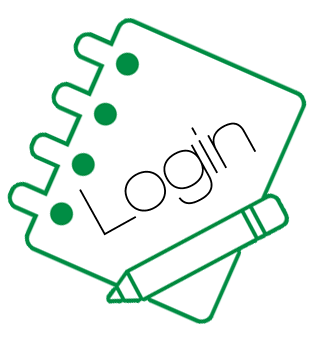
<style>
.page{position:relative;width:330px;height:338px;background:#ffffff}
.page>*{position:absolute;margin:0}
.t1{font:72px "HelveticaNeue-UltraLigExt";color:#000000}
</style>
<div class="page">
<p class="t1" style="left:79px;top:122px;width:177px;height:114px;rotate:-29deg">Login</p>
</div>
